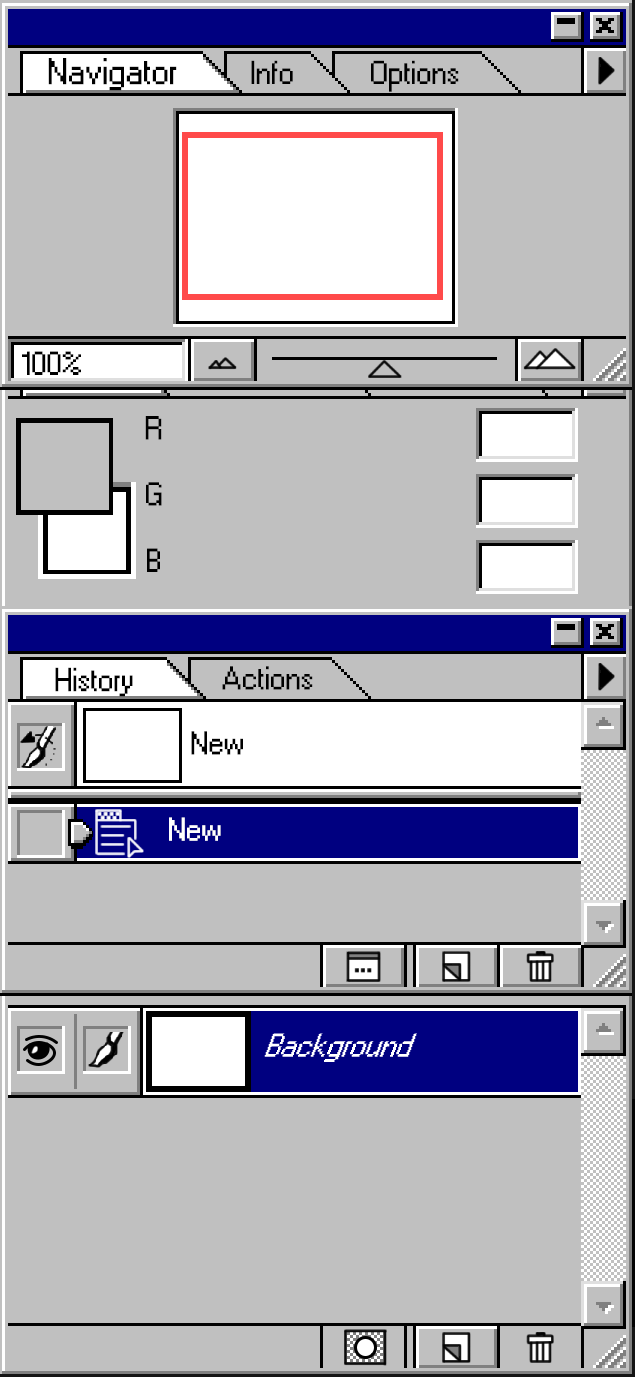
<style>
.page{position:relative;width:635px;height:1377px;background:#c0c0c0}
.page>*{position:absolute;margin:0}
.t1{font:36.1px "Windows";color:#000000}
.t2{font:32px "Windows";color:#000000}
.t3{font:32px "Windows";color:#ffffff}
</style>
<div class="page">
<p class="t1" style="left:48px;top:58px;width:129px;height:33px">Navigator</p>
<p class="t2" style="left:251px;top:60px;width:42px;height:24px">Info</p>
<p class="t2" style="left:371px;top:60px;width:88px;height:32px">Options</p>
<p class="t2" style="left:22px;top:351px;width:59px;height:24px">100%</p>
<p class="t2" style="left:145px;top:416px;width:17px;height:24px">R</p>
<p class="t2" style="left:146px;top:482px;width:16px;height:24px">G</p>
<p class="t2" style="left:147px;top:548px;width:13px;height:24px">B</p>
<p class="t2" style="left:55px;top:667px;width:78px;height:30px">History</p>
<p class="t2" style="left:222px;top:666px;width:91px;height:24px">Actions</p>
<p class="t2" style="left:191px;top:731px;width:52px;height:24px">New</p>
<p class="t3" style="left:169px;top:817px;width:52px;height:24px">New</p>
</div>
